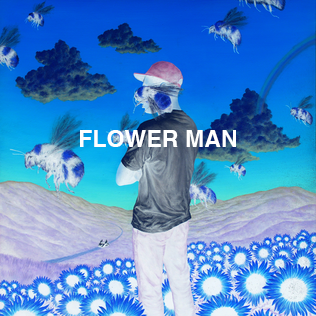
<style>
.page{position:relative;width:316px;height:316px}
.page>*{position:absolute;margin:0}
.t1{font:23.2px "Helvetica-Bold";color:#ffffff}
</style>
<div class="page">
<p class="t1" style="left:80px;top:130px;width:156px;height:17px">FLOWER MAN</p>
</div>
